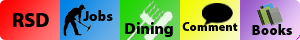
<style>
.page{position:relative;width:300px;height:40px}
.page>*{position:absolute;margin:0}
.t1{font:19.8px "MyriadPro-Black";color:#000000}
.t2{font:14.3px "MyriadPro-Black";color:#000000}
.t3{font:15.9px "MyriadPro-Black";color:#000000}
.t4{font:12.5px "MyriadPro-Black";color:#000000}
.t5{font:14.4px "MyriadPro-Black";color:#000000}
</style>
<div class="page">
<p class="t1" style="left:13px;top:13px;width:36px;height:14px">RSD</p>
<p class="t2" style="left:83px;top:10px;width:30px;height:11px">Jobs</p>
<p class="t3" style="left:125px;top:22px;width:48px;height:15px">Dining</p>
<p class="t4" style="left:182px;top:22px;width:56px;height:9px">Comment</p>
<p class="t5" style="left:252px;top:24px;width:40px;height:11px">Books</p>
</div>
